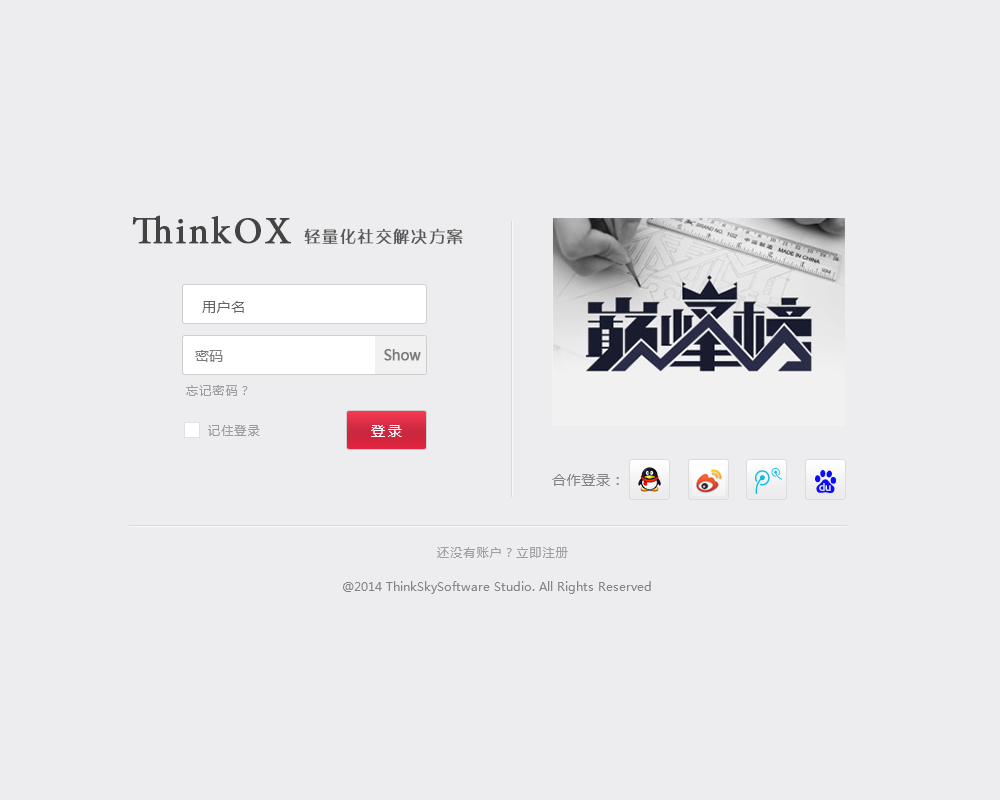
<style>
.page{position:relative;width:1000px;height:800px;background:#ededef}
.page>*{position:absolute;margin:0}
.t1{font:38px "MinionPro-Regular";letter-spacing:0.05em;color:#434343;font-weight:bold}
.t2{font:16px "GJJZQJW--GB1-0";letter-spacing:0.05em;color:#555555;font-weight:bold}
.t3{font:14px "MicrosoftYaHei";letter-spacing:0.05em;color:#646464}
.t4{font:14px "MicrosoftYaHei";color:#7a7a7a}
.t5{font:14px "MicrosoftYaHei";color:#7a7a7a;font-weight:bold}
.t6{font:12px "MicrosoftYaHei";letter-spacing:0.1em;color:#9c9c9c}
.t7{font:14px "MicrosoftYaHei";letter-spacing:0.2em;color:#ffffff}
.t8{font:14px "MicrosoftYaHei";letter-spacing:0.05em;color:#848484}
.t9{font:12px "MicrosoftYaHei";letter-spacing:0.1em;color:#a09f9f}
.t10{font:12px "MicrosoftYaHei";color:#848484}
</style>
<div class="page">
<p class="t1" style="left:132px;top:215px;width:159px;height:29px">ThinkOX</p>
<p class="t2" style="left:304px;top:228px;width:159px;height:17px">轻量化社交解决方案</p>
<p class="t3" style="left:202px;top:301px;width:42px;height:12px">用户名</p>
<p class="t4" style="left:195px;top:350px;width:28px;height:12px">密码</p>
<p class="t5" style="left:384px;top:349px;width:37px;height:12px">Show</p>
<p class="t6" style="left:186px;top:385px;width:62px;height:11px">忘记密码？</p>
<p class="t6" style="left:208px;top:425px;width:52px;height:11px">记住登录</p>
<p class="t7" style="left:371px;top:425px;width:31px;height:12px">登录</p>
<p class="t8" style="left:552px;top:474px;width:67px;height:12px">合作登录：</p>
<p class="t9" style="left:437px;top:547px;width:131px;height:11px">还没有账户？立即注册</p>
<p class="t10" style="left:343px;top:581px;width:308px;height:13px">@2014 ThinkSkySoftware Studio. All Rights Reserved</p>
</div>
